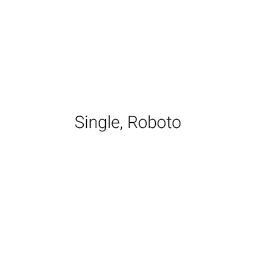
<style>
.page{position:relative;width:256px;height:256px;background:#ffffff}
.page>*{position:absolute;margin:0}
.t1{font:17px "Roboto-Light";color:#000000}
</style>
<div class="page">
<p class="t1" style="left:75px;top:115px;width:106px;height:17px">Single, Roboto</p>
</div>
